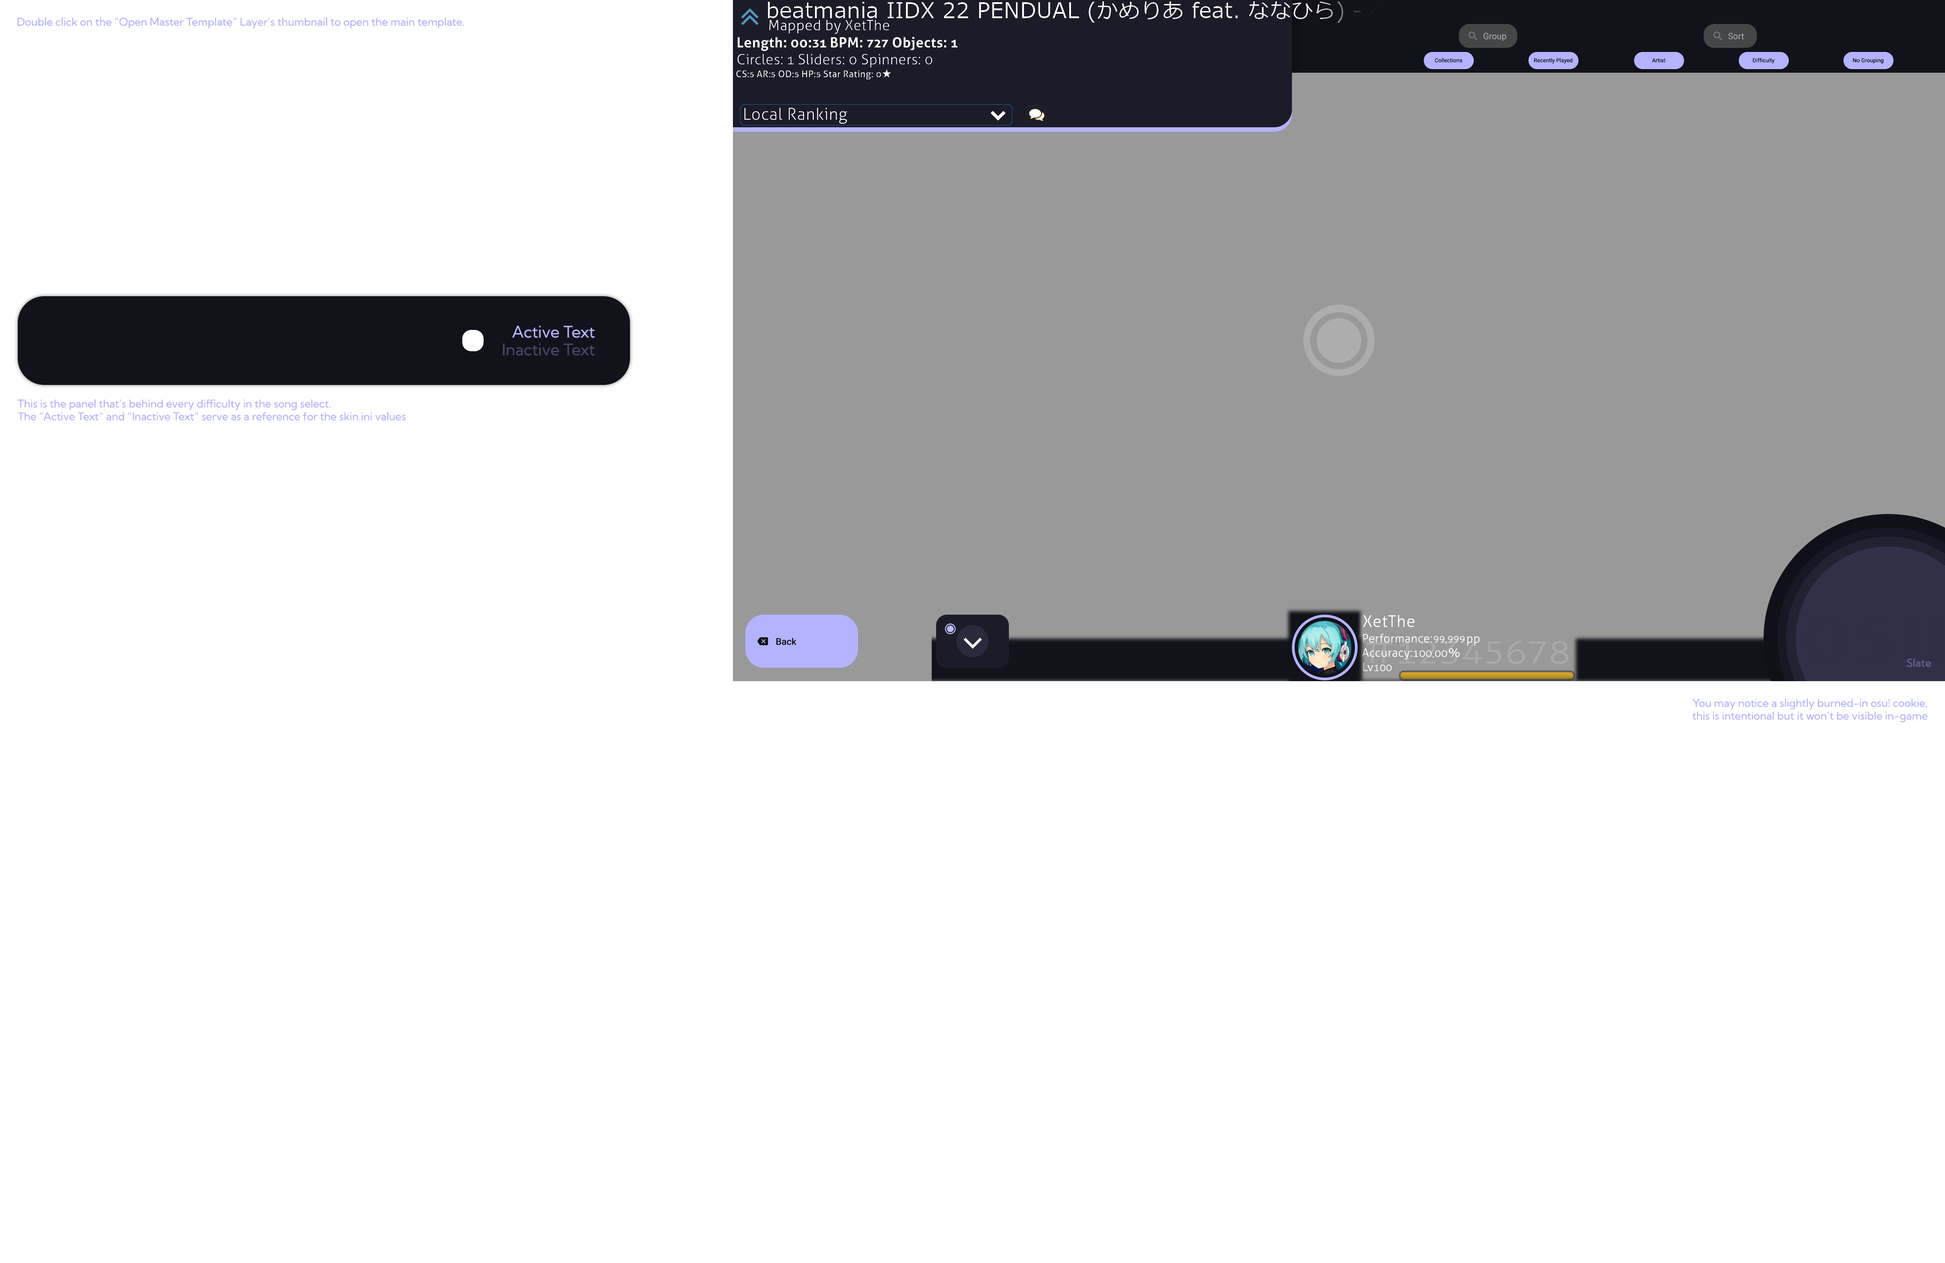
<style>
.page{position:relative;width:1945px;height:1263px;background:#ffffff}
.page>*{position:absolute;margin:0}
.t1{font:10.6px "KumbhSans-Regular";color:#b3b2ff}
.t2{font:8.7px "Roboto-Regular";color:#acb0b0}
.t3{font:5.6px "Roboto-Regular";color:#000000}
.t4{font:16px "KumbhSans-Regular";color:#b3b3ff}
.t5{font:16px "KumbhSans-Regular";color:#474766}
.t6{font:9.3px "Roboto-Medium";color:#000000}
.t7{font:10.6px "KumbhSans-Medium";color:#606090}
</style>
<div class="page">
<p class="t1" style="left:17px;top:17px;width:447px;height:11px">Double click on the “Open Master Template” Layer’s thumbnail to open the main template.</p>
<p class="t2" style="left:1483px;top:33px;width:23px;height:8px">Group</p>
<p class="t2" style="left:1728px;top:33px;width:16px;height:6px">Sort</p>
<p class="t3" style="left:1435px;top:58px;width:27px;height:5px">Collections</p>
<p class="t3" style="left:1534px;top:58px;width:38px;height:6px">Recently Played</p>
<p class="t3" style="left:1652px;top:58px;width:13px;height:5px">Artist</p>
<p class="t3" style="left:1753px;top:58px;width:21px;height:6px">Difficulty</p>
<p class="t3" style="left:1853px;top:58px;width:31px;height:6px">No Grouping</p>
<p class="t4" style="left:512px;top:326px;width:83px;height:12px">Active Text</p>
<p class="t5" style="left:503px;top:343px;width:92px;height:13px">Inactive Text</p>
<p class="t1" style="left:18px;top:399px;width:388px;height:22px">This is the panel that’s behind every difficulty in the song select.<br>The “Active Text” and “Inactive Text” serve as a reference for the skin.ini values</p>
<p class="t6" style="left:776px;top:638px;width:20px;height:7px">Back</p>
<p class="t7" style="left:1906px;top:659px;width:25px;height:8px">Slate</p>
<p class="t1" style="left:1692px;top:699px;width:236px;height:24px;text-align:right">You may notice a slightly burned-in osu! cookie,<br>this is intentional but it won’t be visible in-game</p>
</div>
